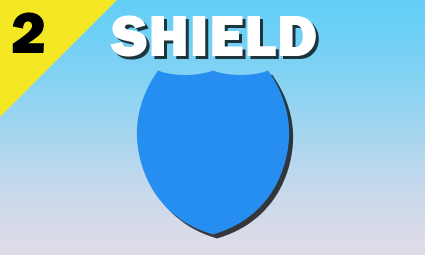
<style>
.page{position:relative;width:425px;height:255px}
.page>*{position:absolute;margin:0}
.t1{font:60px "FranklinGothic-Heavy";color:#000000}
.t2{font:60px "FranklinGothic-Heavy";color:#ffffff}
</style>
<div class="page">
<p class="t1" style="left:12px;top:12px;width:32px;height:41px">2</p>
<p class="t2" style="left:110px;top:15px;width:206px;height:42px">SHIELD</p>
</div>
